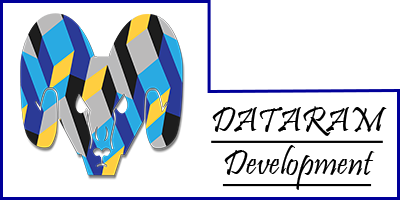
<style>
.page{position:relative;width:400px;height:200px;background:#ffffff}
.page>*{position:absolute;margin:0}
.t1{font:36px "Pristina-Regular";color:#000000;text-decoration:underline}
</style>
<div class="page">
<p class="t1" style="left:211px;top:106px;width:176px;height:84px;text-align:center">DATARAM<br>Development</p>
</div>
